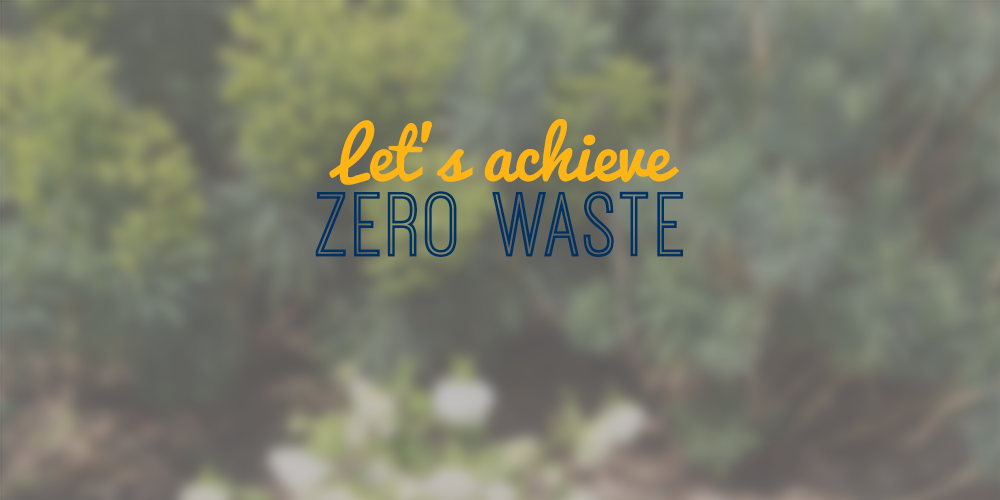
<style>
.page{position:relative;width:1000px;height:500px}
.page>*{position:absolute;margin:0}
.t1{font:66.7px/108.3px "Pacifico";color:#fdb515}
.t2{font:95.8px/75px "OstrichSansInline-Regular";letter-spacing:0.04em;color:#003262}
</style>
<div class="page">
<p class="t1" style="left:315px;top:119px;width:368px;height:138px;text-align:center">Let’s achieve<br><span class="t2">zero waste</span></p>
</div>
